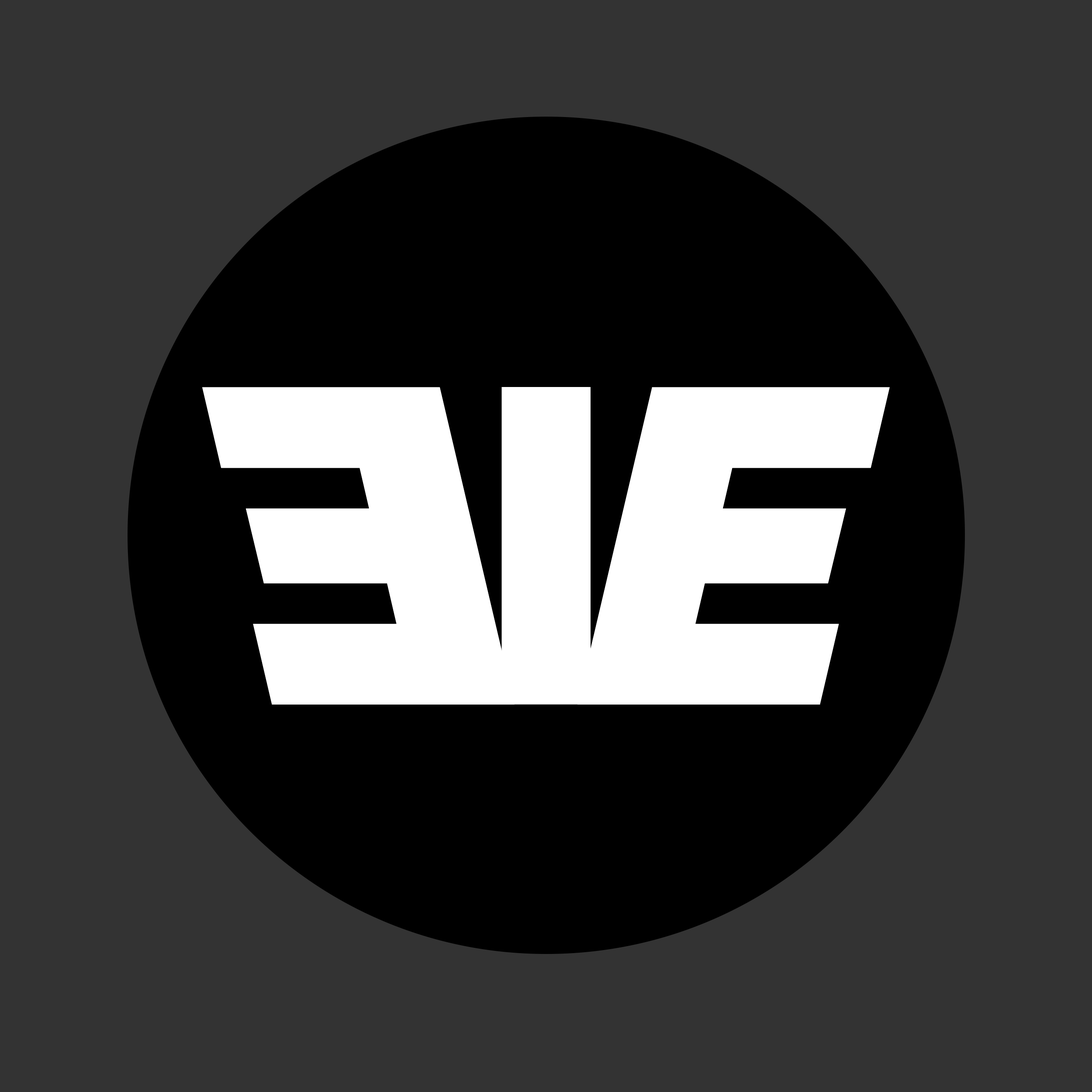
<style>
.page{position:relative;width:1092px;height:1092px;background:#333333}
.page>*{position:absolute;margin:0}
.t1{font:440.7px "ClementePDar-UltraBoldItalic";color:#ffffff}
</style>
<div class="page">
<p class="t1" style="left:202px;top:387px;width:313px;height:318px;rotate:180deg">E</p>
<p class="t1" style="left:577px;top:387px;width:313px;height:318px">E</p>
</div>
